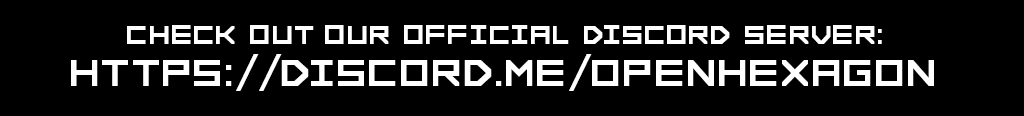
<style>
.page{position:relative;width:1024px;height:116px;background:#000000}
.page>*{position:absolute;margin:0}
.t1{font:35px "FORCED-SQUARE";color:#ffffff;text-transform:uppercase}
.t2{font:50px "FORCED-SQUARE";color:#ffffff;text-transform:uppercase}
</style>
<div class="page">
<p class="t1" style="left:127px;top:25px;width:755px;height:19px">Check out our official Discord Server:</p>
<p class="t2" style="left:71px;top:54px;width:863px;height:37px">https://discord.me/openhexagon</p>
</div>
